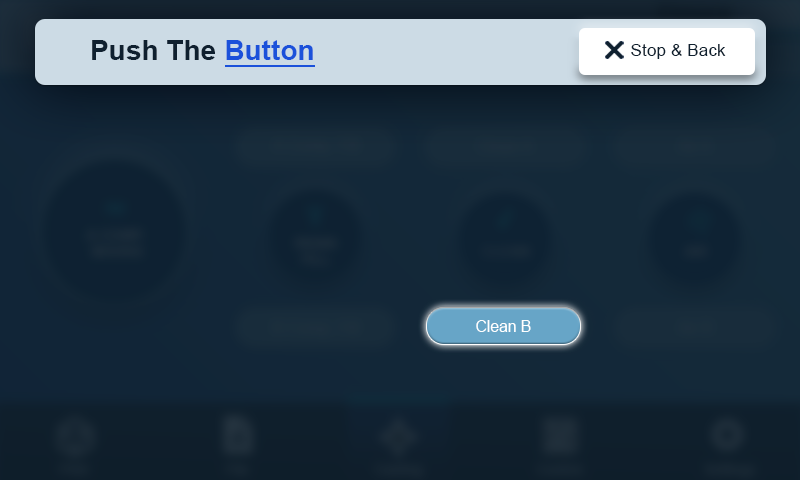
<style>
.page{position:relative;width:800px;height:480px}
.page>*{position:absolute;margin:0}
.t1{font:27.8px "Arial-BoldMT";letter-spacing:0.01em;color:#0f202f}
.t2{font:27.8px "Arial-BoldMT";letter-spacing:0.01em;color:#1b51da}
.t3{font:17.1px "ArialMT";letter-spacing:0.01em;color:#0f202f}
.t4{font:15.6px "ArialMT";color:#ffffff}
</style>
<div class="page">
<p class="t1" style="left:92px;top:40px;width:221px;height:20px">Push The <span class="t2">Button</span></p>
<p class="t3" style="left:631px;top:44px;width:95px;height:15px">Stop &amp; Back</p>
<p class="t4" style="left:476px;top:320px;width:55px;height:12px">Clean B</p>
</div>
